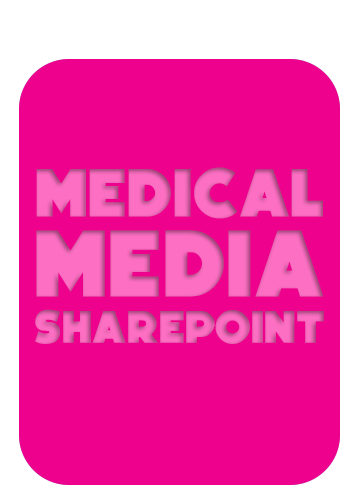
<style>
.page{position:relative;width:360px;height:504px;background:#ee028d}
.page>*{position:absolute;margin:0}
.t1{font:70.1px "Boldfinger";color:#fd6fc3}
.t2{font:97.3px "Boldfinger";color:#fd6fc3}
.t3{font:46.9px "Boldfinger";color:#fd6fc3}
</style>
<div class="page">
<p class="t1" style="left:36px;top:167px;width:287px;height:52px">MEDICAL</p>
<p class="t2" style="left:36px;top:230px;width:288px;height:67px">MEDIA</p>
<p class="t3" style="left:35px;top:309px;width:289px;height:35px">SHAREPOINT</p>
</div>
